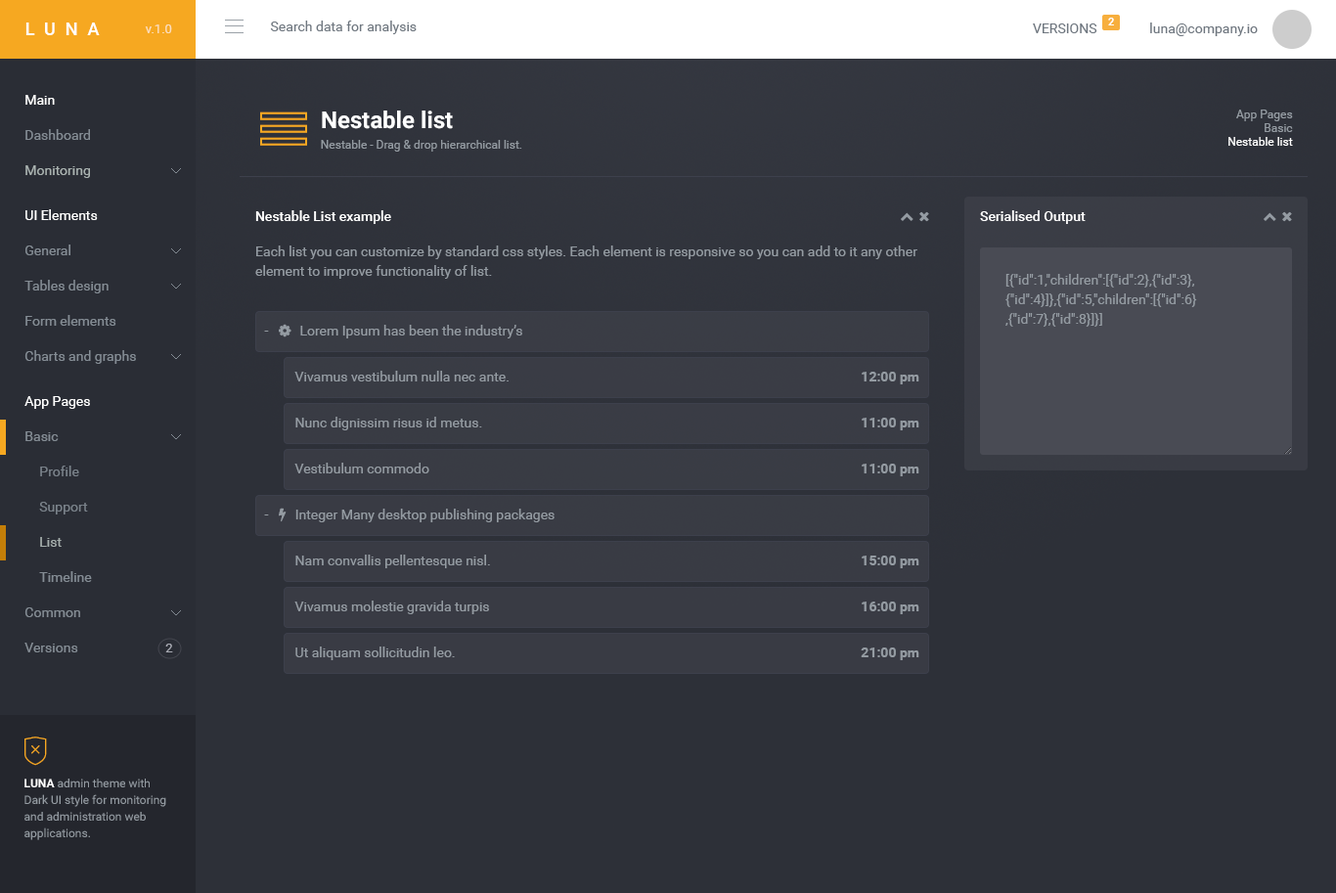
<style>
.page{position:relative;width:1336px;height:893px;background:#2d3038}
.page>*{position:absolute;margin:0}
.t1{font:10.8px "Roboto-Bold";color:#ffffff}
.t2{font:17.6px "Roboto-Medium";letter-spacing:0.55em;color:#ffffff}
.t3{font:12.7px "Roboto-Regular";color:#fbdfbc}
.t4{font:13.7px "Roboto-Regular";color:#6f7780}
.t5{font:13.7px "Roboto-Regular";color:#ffffff}
.t6{font:23.5px "Roboto-Bold";color:#ffffff}
.t7{font:11.7px/13.7px "Roboto-Regular";color:#949ba2}
.t8{font:11.7px/13.7px "Roboto-Regular";color:#ffffff}
.t9{font:13.7px "Roboto-Regular";color:#848c94}
.t10{font:11.7px "Roboto-Regular";color:#949ba2}
.t11{font:13.7px "Roboto-Regular";color:#a9b2b0}
.t12{font:13.7px "Roboto-Medium";color:#ffffff}
.t13{font:13.7px/19.6px "Roboto-Regular";color:#949ba2}
.t14{font:13.7px "Roboto-Regular";color:#949ba2}
.t15{font:13.7px "Roboto-Bold";color:#949ba2}
.t16{font:13.7px "Roboto-Regular";color:#7a828a}
.t17{font:13.7px "Roboto-Regular";color:#a6afad}
.t18{font:12.7px "Roboto-Regular";color:#aaacb5}
.t19{font:11.7px/16.6px "Roboto-Regular";color:#949ba2}
.t20{font:11.7px/16.6px "Roboto-Bold";color:#ffffff}
</style>
<div class="page">
<p class="t1" style="left:1108px;top:18px;width:6px;height:7px">2</p>
<p class="t2" style="left:25px;top:22px;width:75px;height:13px">LUNA</p>
<p class="t3" style="left:145px;top:24px;width:27px;height:9px">v.1.0</p>
<p class="t4" style="left:270px;top:21px;width:147px;height:13px">Search data for analysis</p>
<p class="t4" style="left:1033px;top:23px;width:64px;height:10px">VERSIONS</p>
<p class="t4" style="left:1150px;top:22px;width:107px;height:14px">luna@company.io</p>
<p class="t5" style="left:25px;top:95px;width:30px;height:10px">Main</p>
<p class="t6" style="left:322px;top:110px;width:131px;height:19px">Nestable list</p>
<p class="t7" style="left:1228px;top:110px;width:65px;height:36px;text-align:right">App Pages<br>Basic<br><span class="t8">Nestable list</span></p>
<p class="t9" style="left:25px;top:129px;width:65px;height:11px">Dashboard</p>
<p class="t10" style="left:321px;top:140px;width:201px;height:12px">Nestable - Drag &amp; drop hierarchical list.</p>
<p class="t11" style="left:25px;top:165px;width:65px;height:13px">Monitoring</p>
<p class="t5" style="left:25px;top:209px;width:73px;height:11px">UI Elements</p>
<p class="t12" style="left:255px;top:210px;width:136px;height:14px">Nestable List example</p>
<p class="t12" style="left:980px;top:210px;width:105px;height:14px">Serialised Output</p>
<p class="t9" style="left:25px;top:244px;width:45px;height:11px">General</p>
<p class="t13" style="left:255px;top:245px;width:662px;height:34px">Each list you can customize by standard css styles. Each element is responsive so you can add to it any other element to improve functionality of list.</p>
<p class="t9" style="left:24px;top:280px;width:85px;height:13px">Tables design</p>
<p class="t13" style="left:1005px;top:274px;width:192px;height:53px">[{"id":1,"children":[{"id":2},{"id":3},{"id":4}]},{"id":5,"children":[{"id":6},{"id":7},{"id":8}]}]</p>
<p class="t9" style="left:25px;top:315px;width:91px;height:11px">Form elements</p>
<p class="t9" style="left:24px;top:350px;width:112px;height:14px">Charts and graphs</p>
<p class="t14" style="left:294px;top:371px;width:214px;height:10px">Vivamus vestibulum nulla nec ante.</p>
<p class="t15" style="left:861px;top:372px;width:58px;height:12px">12:00 pm</p>
<p class="t5" style="left:24px;top:396px;width:66px;height:13px">App Pages</p>
<p class="t14" style="left:295px;top:417px;width:187px;height:13px">Nunc dignissim risus id metus.</p>
<p class="t15" style="left:861px;top:418px;width:58px;height:12px">11:00 pm</p>
<p class="t9" style="left:25px;top:431px;width:34px;height:10px">Basic</p>
<p class="t16" style="left:40px;top:465px;width:39px;height:11px">Profile</p>
<p class="t14" style="left:294px;top:463px;width:135px;height:10px">Vestibulum commodo</p>
<p class="t15" style="left:861px;top:463px;width:58px;height:13px">11:00 pm</p>
<p class="t16" style="left:39px;top:502px;width:49px;height:12px">Support</p>
<p class="t17" style="left:40px;top:537px;width:22px;height:10px">List</p>
<p class="t14" style="left:295px;top:554px;width:195px;height:14px">Nam convallis pellentesque nisl.</p>
<p class="t15" style="left:861px;top:555px;width:58px;height:13px">15:00 pm</p>
<p class="t9" style="left:39px;top:571px;width:53px;height:11px">Timeline</p>
<p class="t14" style="left:294px;top:600px;width:195px;height:14px">Vivamus molestie gravida turpis</p>
<p class="t15" style="left:861px;top:601px;width:58px;height:13px">16:00 pm</p>
<p class="t9" style="left:24px;top:607px;width:56px;height:10px">Common</p>
<p class="t9" style="left:24px;top:642px;width:54px;height:10px">Versions</p>
<p class="t18" style="left:165px;top:643px;width:8px;height:9px">2</p>
<p class="t14" style="left:295px;top:646px;width:160px;height:14px">Ut aliquam sollicitudin leo.</p>
<p class="t15" style="left:860px;top:647px;width:59px;height:13px">21:00 pm</p>
<p class="t19" style="left:24px;top:778px;width:142px;height:62px"><span class="t20">LUNA </span>admin theme with Dark UI style for monitoring and administration web applications.</p>
</div>
